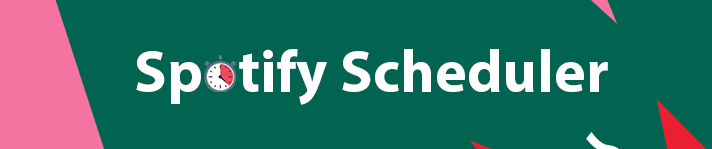
<style>
.page{position:relative;width:712px;height:149px;background:#016450}
.page>*{position:absolute;margin:0}
.t1{font:60px "MyriadPro-Bold";color:#ffffff}
</style>
<div class="page">
<p class="t1" style="left:136px;top:49px;width:472px;height:56px">Spotify Scheduler</p>
</div>
